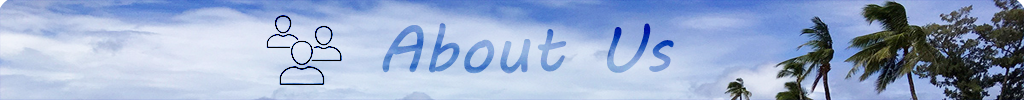
<style>
.page{position:relative;width:1024px;height:100px}
.page>*{position:absolute;margin:0}
.t1{font:66.3px "MVBoli"}
</style>
<div class="page">
<p class="t1" style="left:382px;top:23px;width:292px;height:51px">About Us</p>
</div>
